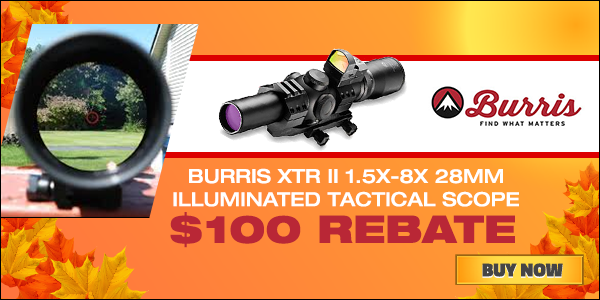
<style>
.page{position:relative;width:600px;height:300px}
.page>*{position:absolute;margin:0}
.t1{font:19.3px "HelveticaNeueLTStd-MdEx";color:#ffffff}
.t2{font:38.1px "HelveticaNeueLTStd-BlkEx";color:#b92736}
.t3{font:18.7px "Titillium-Black";letter-spacing:0.005em;color:#454545}
</style>
<div class="page">
<p class="t1" style="left:173px;top:168px;width:346px;height:39px;text-align:center">BURRIS XTR II 1.5X-8X 28MM<br>ILLUMINATED TACTICAL SCOPE</p>
<p class="t2" style="left:170px;top:212px;width:345px;height:36px">$100 REBATE</p>
<p class="t3" style="left:482px;top:264px;width:81px;height:14px">BUY NOW</p>
<p class="t3" style="left:482px;top:263px;width:81px;height:14px">BUY NOW</p>
</div>
